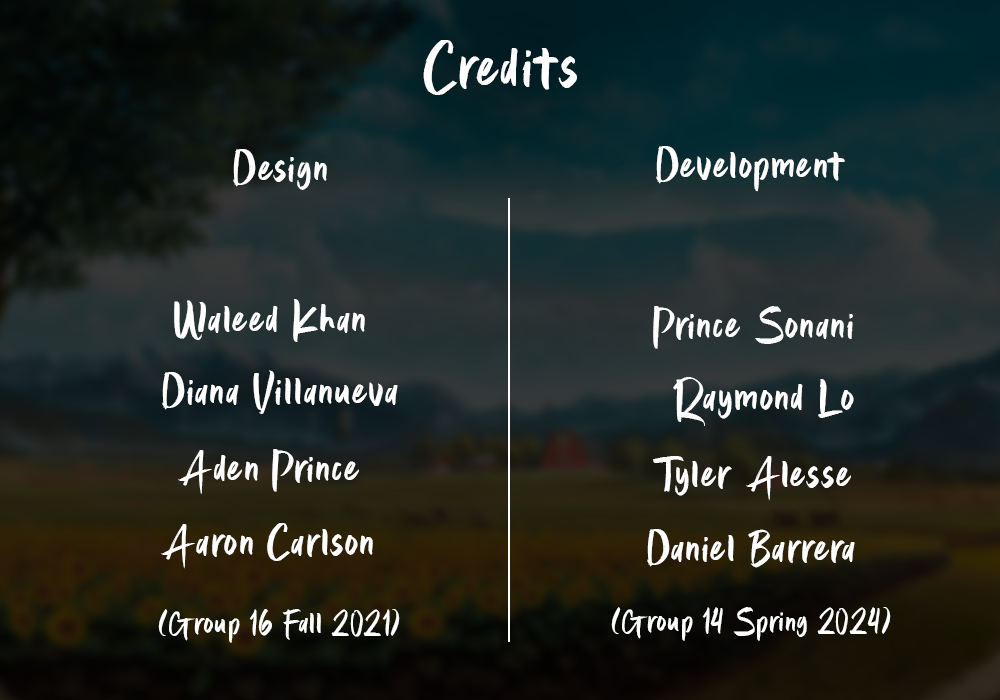
<style>
.page{position:relative;width:1000px;height:700px}
.page>*{position:absolute;margin:0}
.t1{font:73.2px "StoryNight";color:#ffffff}
.t2{font:50px "StoryNight";color:#ffffff}
.t3{font:50.1px "StoryNight";color:#ffffff}
.t4{font:36.6px "StoryNight";color:#ffffff}
</style>
<div class="page">
<p class="t1" style="left:423px;top:40px;width:154px;height:55px">Credits</p>
<p class="t2" style="left:233px;top:149px;width:94px;height:41px">Design</p>
<p class="t2" style="left:656px;top:146px;width:189px;height:46px">Development</p>
<p class="t3" style="left:174px;top:299px;width:191px;height:43px">Waleed Khan</p>
<p class="t3" style="left:653px;top:306px;width:200px;height:43px">Prince Sonani</p>
<p class="t3" style="left:162px;top:370px;width:236px;height:44px">Diana Villanueva</p>
<p class="t3" style="left:673px;top:377px;width:181px;height:49px">Raymond Lo</p>
<p class="t3" style="left:178px;top:449px;width:181px;height:46px">Aden Prince</p>
<p class="t3" style="left:653px;top:456px;width:198px;height:45px">Tyler Alesse</p>
<p class="t3" style="left:161px;top:523px;width:212px;height:46px">Aaron Carlson</p>
<p class="t3" style="left:647px;top:529px;width:208px;height:39px">Daniel Barrera</p>
<p class="t4" style="left:158px;top:609px;width:242px;height:34px">(Group 16 Fall 2021)</p>
<p class="t4" style="left:611px;top:607px;width:280px;height:34px">(Group 14 Spring 2024)</p>
</div>
